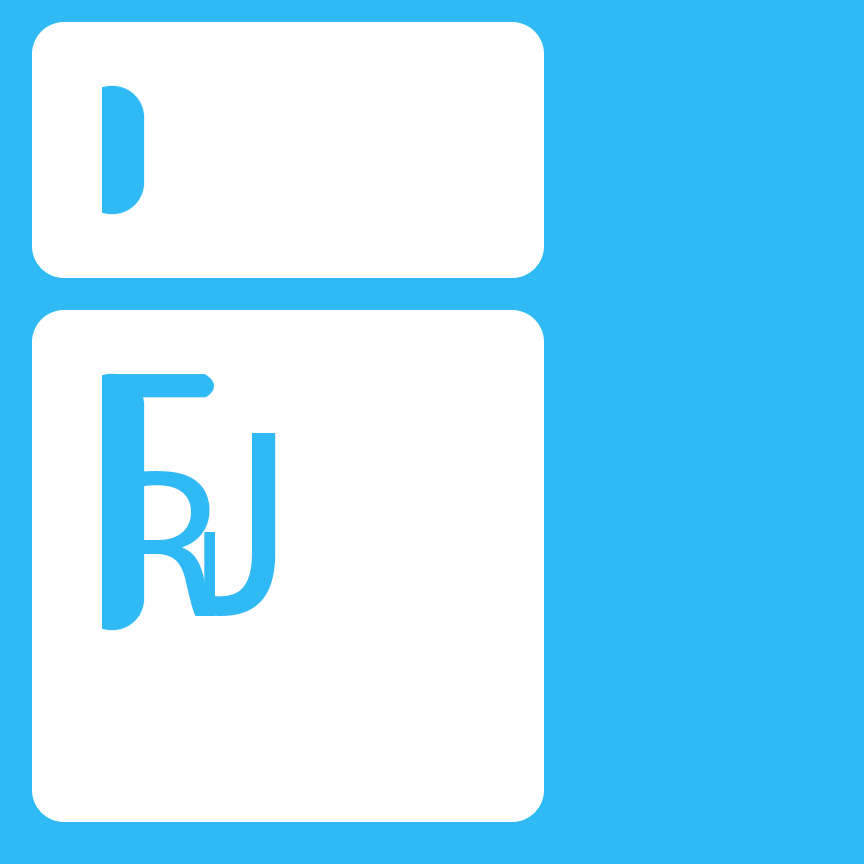
<style>
.page{position:relative;width:864px;height:864px;background:#2fb9f5}
.page>*{position:absolute;margin:0}
.t1{font:266.7px "MyriadPro-Regular";color:#2fb9f5}
.t2{font:213.3px "MyriadPro-Regular";color:#2fb9f5}
.t3{font:124.4px "MyriadPro-Regular";color:#2fb9f5}
</style>
<div class="page">
<p class="t1" style="left:196px;top:433px;width:80px;height:183px">J</p>
<p class="t2" style="left:121px;top:471px;width:94px;height:145px">R</p>
<p class="t3" style="left:204px;top:532px;width:11px;height:84px">I</p>
</div>
